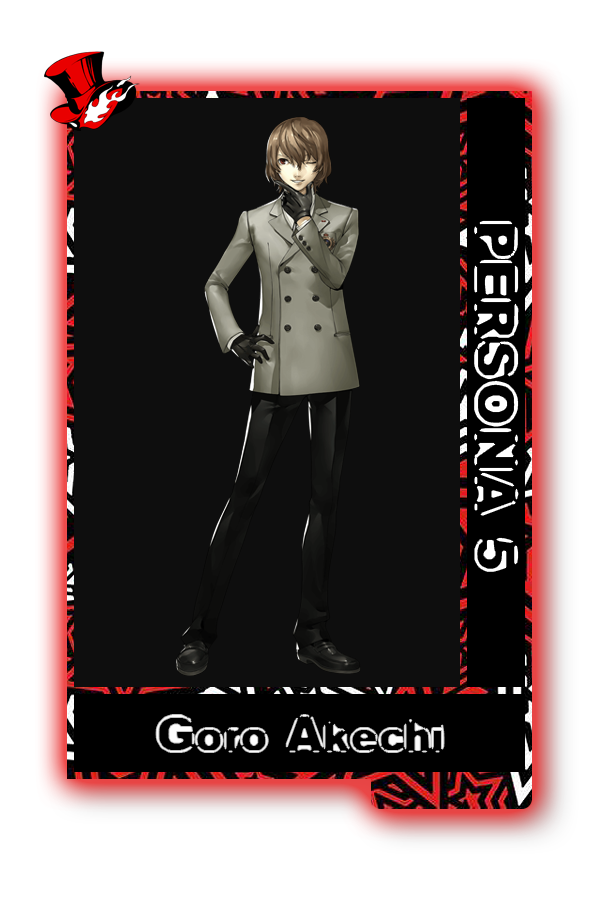
<style>
.page{position:relative;width:600px;height:900px;background:#0e0e0e}
.page>*{position:absolute;margin:0}
.t1{font:41.7px "Untitled";color:#ffffff}
.t2{font:37.5px "Untitled";letter-spacing:-0.06em;color:#fdfdfd}
</style>
<div class="page">
<p class="t1" style="left:475px;top:221px;width:43px;height:350px;rotate:90deg">PERSONA 5</p>
<p class="t2" style="left:156px;top:715px;width:288px;height:37px">Goro Akechi</p>
</div>
